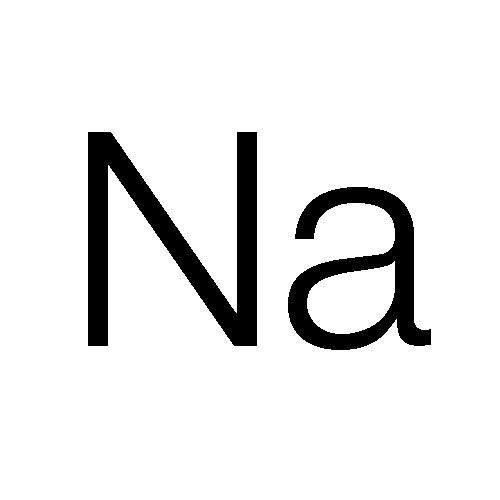
<style>
.page{position:relative;width:500px;height:500px;background:#ffffff}
.page>*{position:absolute;margin:0}
.t1{font:300px "HelveticaNeue-Light";color:#000000}
</style>
<div class="page">
<p class="t1" style="left:88px;top:132px;width:343px;height:218px">Na</p>
</div>
